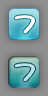
<style>
.page{position:relative;width:48px;height:96px}
.page>*{position:absolute;margin:0}
.t1{font:24px "DFMaruMoji-W9-WING-RKSJ-H";color:#ffffff;font-weight:bold}
.t2{font:24px "DFMaruMoji-W9-WING-RKSJ-H";color:#b5e3e9;font-weight:bold}
</style>
<div class="page">
<p class="t1" style="left:14px;top:15px;width:21px;height:19px">7</p>
<p class="t2" style="left:14px;top:63px;width:21px;height:19px">7</p>
</div>
